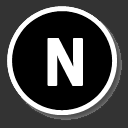
<style>
.page{position:relative;width:128px;height:128px;background:#000000}
.page>*{position:absolute;margin:0}
.t1{font:60px "AdobeGothicStd-Bold";color:#ffffff;font-weight:bold}
</style>
<div class="page">
<p class="t1" style="left:47px;top:38px;width:36px;height:48px">N</p>
</div>
